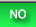
<style>
.page{position:relative;width:36px;height:27px}
.page>*{position:absolute;margin:0}
.t1{font:12.5px "MyriadPro-Regular";color:#ffffff}
</style>
<div class="page">
<p class="t1" style="left:10px;top:9px;width:16px;height:10px">NO</p>
</div>
